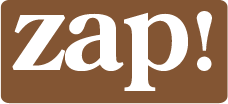
<style>
.page{position:relative;width:228px;height:104px;background:#835533}
.page>*{position:absolute;margin:0}
.t1{font:111.8px "CenturyOldStyleStd-Bold";color:#ffffff}
.t2{font:79px "CenturyOldStyleStd-Bold";color:#ffffff}
</style>
<div class="page">
<p class="t1" style="left:12px;top:11px;width:200px;height:80px">zap<span class="t2">!</span></p>
</div>
